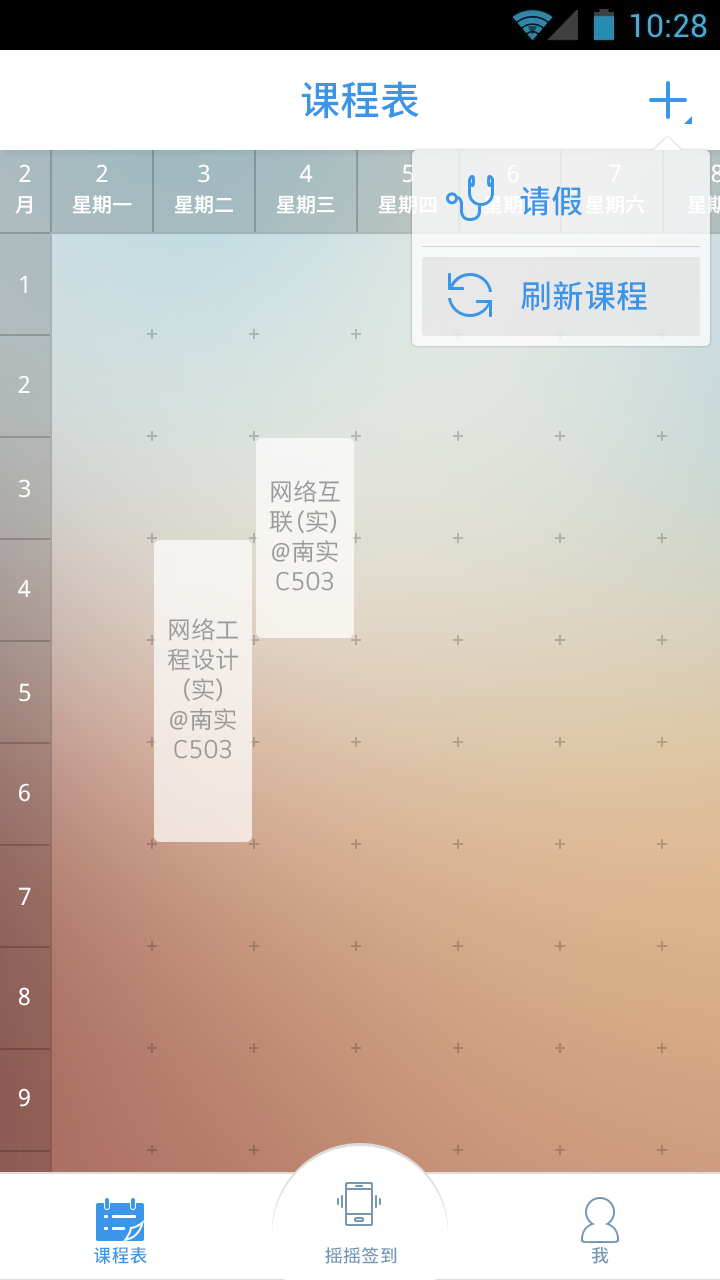
<style>
.page{position:relative;width:720px;height:1280px}
.page>*{position:absolute;margin:0}
.t1{font:40px "NotoSansHans-Medium";color:#3b95e8}
.t2{font:24px/30px "DroidSansFallback";color:#ffffff}
.t3{font:20px/30px "NotoSansHans-Medium";color:#ffffff}
.t4{font:32px "NotoSansHans-Medium";color:#3b95e8}
.t5{font:24px "DroidSansFallback";color:#ffffff}
.t6{font:23.8px "DroidSansFallback";color:#ffffff}
.t7{font:24px/30px "STHeitiSC-Light";color:#999999}
.t8{font:18.2px "NotoSansHans-Medium";letter-spacing:0.02em;color:#3b95e8}
.t9{font:18.1px "NotoSansHans-Medium";letter-spacing:0.02em;color:#7597b3}
.t10{font:18px "NotoSansHans-Medium";letter-spacing:0.02em;color:#7597b3}
</style>
<div class="page">
<p class="t1" style="left:301px;top:81px;width:118px;height:38px">课程表</p>
<p class="t2" style="left:15px;top:164px;width:17px;height:50px;text-align:center">2<br><span class="t3">月</span></p>
<p class="t3" style="left:72px;top:164px;width:60px;height:50px;text-align:center"><span class="t2">2<br></span>星期一</p>
<p class="t3" style="left:174px;top:164px;width:59px;height:50px;text-align:center"><span class="t2">3<br></span>星期二</p>
<p class="t3" style="left:276px;top:164px;width:59px;height:50px;text-align:center"><span class="t2">4<br></span>星期三</p>
<p class="t3" style="left:378px;top:164px;width:59px;height:50px;text-align:center"><span class="t2">5<br></span>星期四</p>
<p class="t3" style="left:483px;top:164px;width:59px;height:50px;text-align:center"><span class="t2">6<br></span>星期五</p>
<p class="t3" style="left:585px;top:164px;width:59px;height:50px;text-align:center"><span class="t2">7<br></span>星期六</p>
<p class="t4" style="left:520px;top:186px;width:62px;height:30px">请假</p>
<p class="t5" style="left:20px;top:275px;width:7px;height:18px">1</p>
<p class="t4" style="left:521px;top:281px;width:126px;height:30px">刷新课程</p>
<p class="t6" style="left:18px;top:375px;width:12px;height:18px">2</p>
<p class="t5" style="left:19px;top:479px;width:11px;height:19px">3</p>
<p class="t7" style="left:270px;top:480px;width:70px;height:111px;text-align:center">网络互联（实）<br>@南实C503</p>
<p class="t6" style="left:18px;top:580px;width:13px;height:17px">4</p>
<p class="t7" style="left:168px;top:618px;width:71px;height:141px;text-align:center">网络工程设计<br>（实）<br>@南实C503</p>
<p class="t5" style="left:19px;top:683px;width:12px;height:19px">5</p>
<p class="t6" style="left:19px;top:783px;width:11px;height:19px">6</p>
<p class="t5" style="left:19px;top:887px;width:12px;height:18px">7</p>
<p class="t6" style="left:19px;top:987px;width:11px;height:19px">8</p>
<p class="t6" style="left:19px;top:1088px;width:11px;height:19px">9</p>
<p class="t8" style="left:94px;top:1247px;width:53px;height:17px">课程表</p>
<p class="t9" style="left:325px;top:1247px;width:72px;height:17px">摇摇签到</p>
<p class="t10" style="left:591px;top:1247px;width:18px;height:17px">我</p>
</div>
